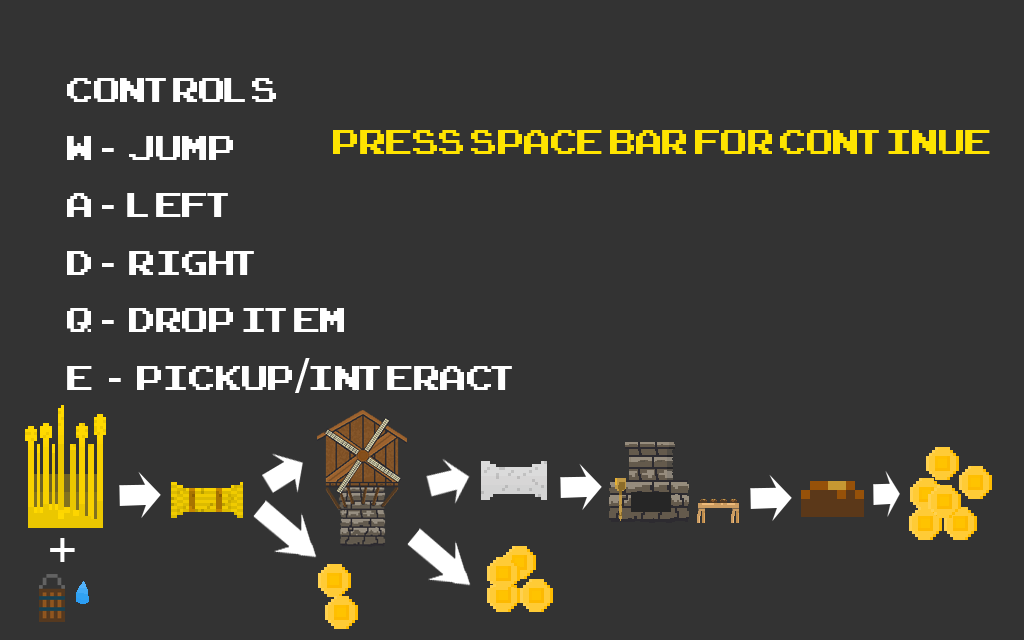
<style>
.page{position:relative;width:1024px;height:640px;background:#333333}
.page>*{position:absolute;margin:0}
.t1{font:48px "ArcadeClassic";color:#ffffff}
.t2{font:48px "Helvetica";color:#ffffff}
.t3{font:48px "ArcadeClassic";color:#ffe400}
</style>
<div class="page">
<p class="t1" style="left:67px;top:78px;width:445px;height:315px">Controls<br>W <span class="t2">- </span>JUMP<br>A <span class="t2">- </span>LEFT<br>D <span class="t2">- </span>RIGHT<br>Q <span class="t2">- </span>DROP ITEM<br>E<span class="t2"> - </span>Pickup<span class="t2">/</span>interact</p>
<p class="t3" style="left:333px;top:130px;width:657px;height:24px">Press space bar for continue</p>
<p class="t2" style="left:50px;top:538px;width:25px;height:24px">+</p>
</div>
